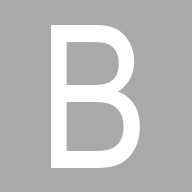
<style>
.page{position:relative;width:192px;height:192px;background:#a9a9a9}
.page>*{position:absolute;margin:0}
.t1{font:200px "ArialNarrow";letter-spacing:0.18em;color:#ffffff}
</style>
<div class="page">
<p class="t1" style="left:51px;top:25px;width:89px;height:143px">B</p>
</div>
